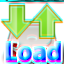
<style>
.page{position:relative;width:64px;height:64px}
.page>*{position:absolute;margin:0}
.t1{font:24px "KozGoPro-Heavy";font-weight:bold}
</style>
<div class="page">
<p class="t1" style="left:5px;top:39px;width:56px;height:20px">Load</p>
</div>
